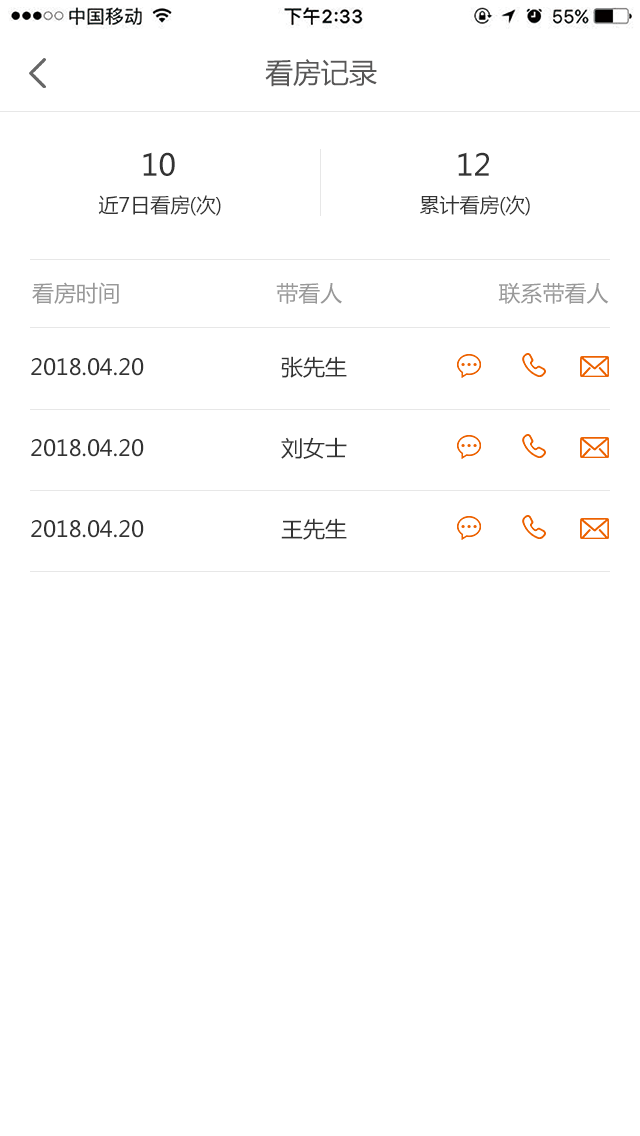
<style>
.page{position:relative;width:640px;height:1136px;background:#ffffff}
.page>*{position:absolute;margin:0}
.t1{font:28px "MicrosoftYaHei";color:#585757}
.t2{font:30px "MicrosoftYaHei";color:#333333}
.t3{font:20px "MicrosoftYaHei";color:#333333}
.t4{font:20px "MicrosoftYaHei";letter-spacing:-0.36em;color:#333333}
.t5{font:22px "MicrosoftYaHei";color:#999999}
.t6{font:22px "MicrosoftYaHei";color:#333333}
</style>
<div class="page">
<p class="t1" style="left:265px;top:59px;width:112px;height:28px">看房记录</p>
<p class="t2" style="left:143px;top:152px;width:32px;height:24px">10</p>
<p class="t2" style="left:458px;top:152px;width:31px;height:24px">12</p>
<p class="t3" style="left:98px;top:195px;width:123px;height:21px">近7日看<span class="t4">房（次）</span></p>
<p class="t4" style="left:420px;top:195px;width:110px;height:21px"><span class="t3">累计看</span>房（次）</p>
<p class="t5" style="left:32px;top:282px;width:577px;height:22px">看房时间                        带看人                        联系带看人</p>
<p class="t6" style="left:31px;top:358px;width:113px;height:18px">2018.04.20</p>
<p class="t6" style="left:281px;top:356px;width:66px;height:22px">张先生</p>
<p class="t6" style="left:281px;top:437px;width:66px;height:22px">刘女士</p>
<p class="t6" style="left:31px;top:439px;width:113px;height:18px">2018.04.20</p>
<p class="t6" style="left:31px;top:520px;width:113px;height:18px">2018.04.20</p>
<p class="t6" style="left:281px;top:518px;width:66px;height:22px">王先生</p>
</div>
